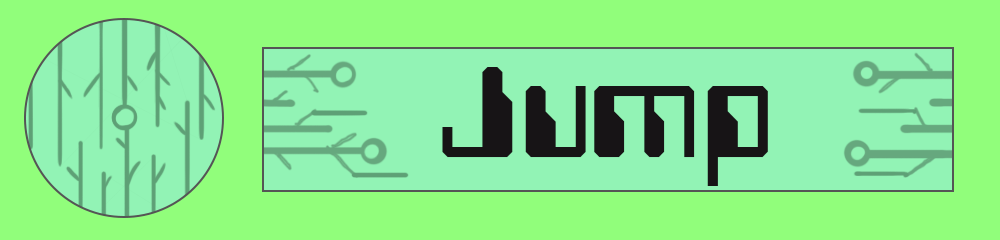
<style>
.page{position:relative;width:1000px;height:240px;background:#91fe7b}
.page>*{position:absolute;margin:0}
.t1{font:150px "Computerfont";color:#171615}
</style>
<div class="page">
<p class="t1" style="left:442px;top:67px;width:326px;height:119px">Jump</p>
</div>
